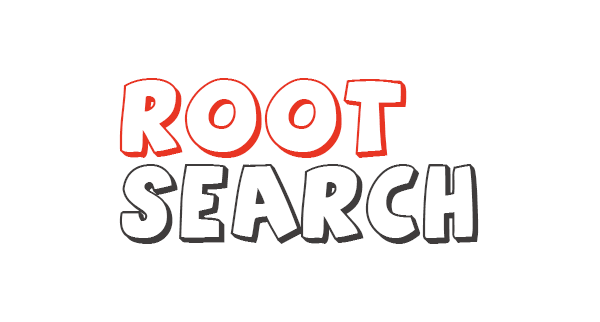
<style>
.page{position:relative;width:600px;height:322px;background:#ffffff}
.page>*{position:absolute;margin:0}
.t1{font:72px "AgentOrange";color:#3f3c3c}
.t2{font:72px "AgentOrange";color:#e83523}
</style>
<div class="page">
<p class="t1" style="left:119px;top:78px;width:360px;height:166px"><span class="t2">ROOT <br></span>SEARCH</p>
</div>
